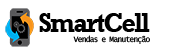
<style>
.page{position:relative;width:177px;height:56px;background:#ffffff}
.page>*{position:absolute;margin:0}
.t1{font:27.5px "Rockwell-Bold";letter-spacing:-0.075em;color:#000000;scale:0.92 1}
.t2{font:8.2px "LucidaConsole";letter-spacing:-0.075em;color:#000000;scale:0.92 1}
</style>
<div class="page">
<p class="t1" style="left:39px;top:13px;width:111px;height:19px">SmartCell</p>
<p class="t2" style="left:73px;top:35px;width:77px;height:9px">Vendas e Manutenção</p>
</div>
